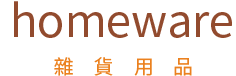
<style>
.page{position:relative;width:236px;height:76px;background:#ffffff}
.page>*{position:absolute;margin:0}
.t1{font:45px "NotoSansCJKtc-Regular";color:#924b2e}
.t2{font:20px "NotoSansCJKtc-Regular";letter-spacing:1em;color:#eb811f}
.t3{font:20px "NotoSansCJKtc-Regular";color:#eb811f}
</style>
<div class="page">
<p class="t1" style="left:14px;top:1px;width:218px;height:37px">homeware</p>
<p class="t2" style="left:54px;top:57px;width:138px;height:19px"><span class="t3"> </span>雜貨用品</p>
</div>
